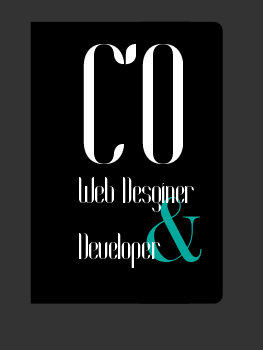
<style>
.page{position:relative;width:263px;height:350px;background:#000000}
.page>*{position:absolute;margin:0}
.t1{font:140px "Coco-Regular";color:#ffffff}
.t2{font:30.6px "Coco-Regular";color:#ffffff}
.t3{font:87.5px "Didot";color:#00a99d}
</style>
<div class="page">
<p class="t1" style="left:83px;top:44px;width:100px;height:120px">C’O</p>
<p class="t2" style="left:79px;top:177px;width:115px;height:35px">Web Desginer</p>
<p class="t3" style="left:146px;top:197px;width:56px;height:65px">&amp;</p>
<p class="t2" style="left:79px;top:233px;width:82px;height:35px">Developer</p>
</div>
